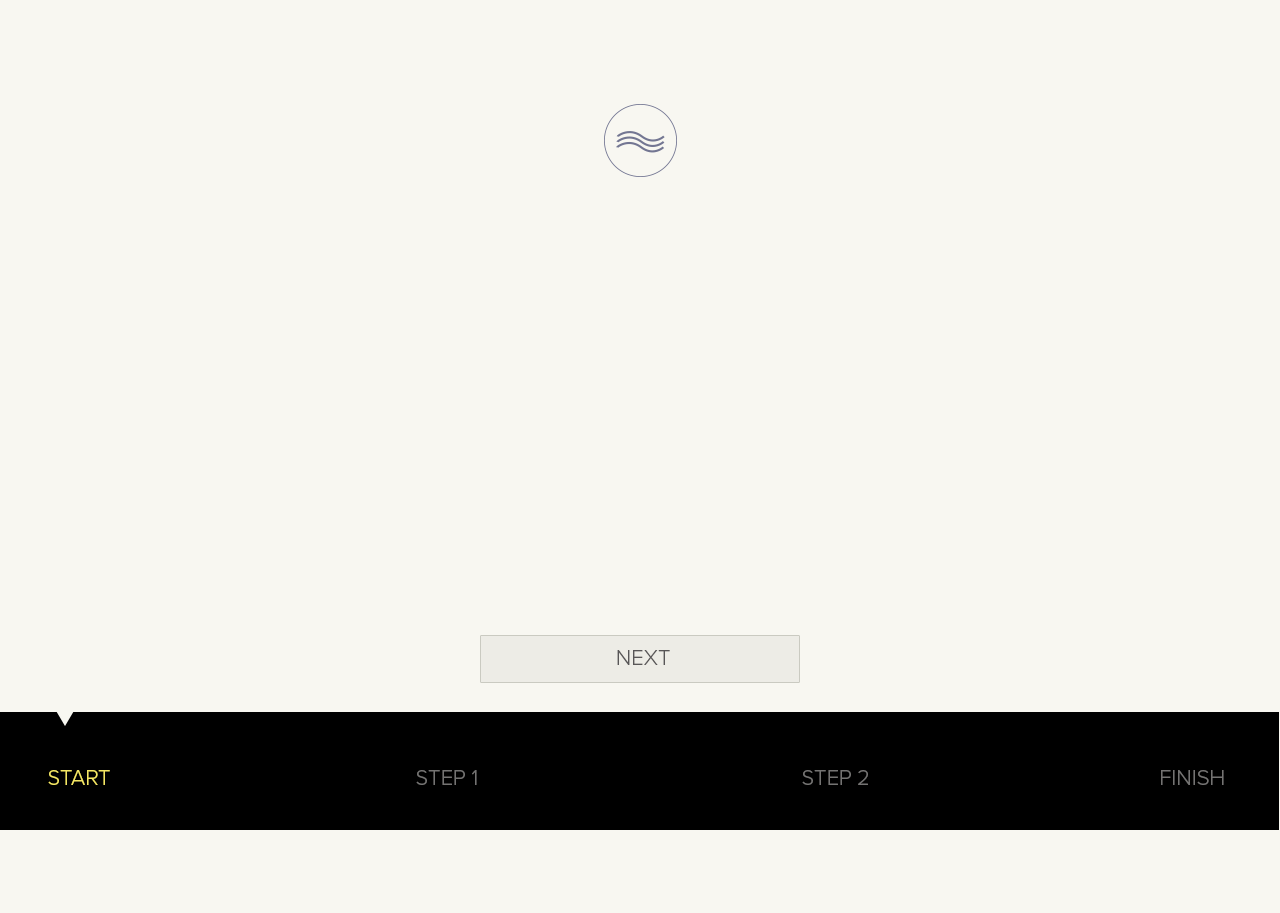
<style>
.page{position:relative;width:1280px;height:913px;background:#f8f7f1}
.page>*{position:absolute;margin:0}
.t1{font:22px "ProximaNova-Light";color:#585657}
.t2{font:22px "ProximaNova-Light";color:#f4e664}
.t3{font:22px "ProximaNova-Light";color:#747372}
</style>
<div class="page">
<p class="t1" style="left:617px;top:650px;width:53px;height:15px">NEXT</p>
<p class="t2" style="left:48px;top:770px;width:62px;height:15px">START</p>
<p class="t3" style="left:416px;top:770px;width:61px;height:15px">STEP 1</p>
<p class="t3" style="left:802px;top:770px;width:66px;height:15px">STEP 2</p>
<p class="t3" style="left:1161px;top:770px;width:63px;height:15px">FINISH</p>
</div>
